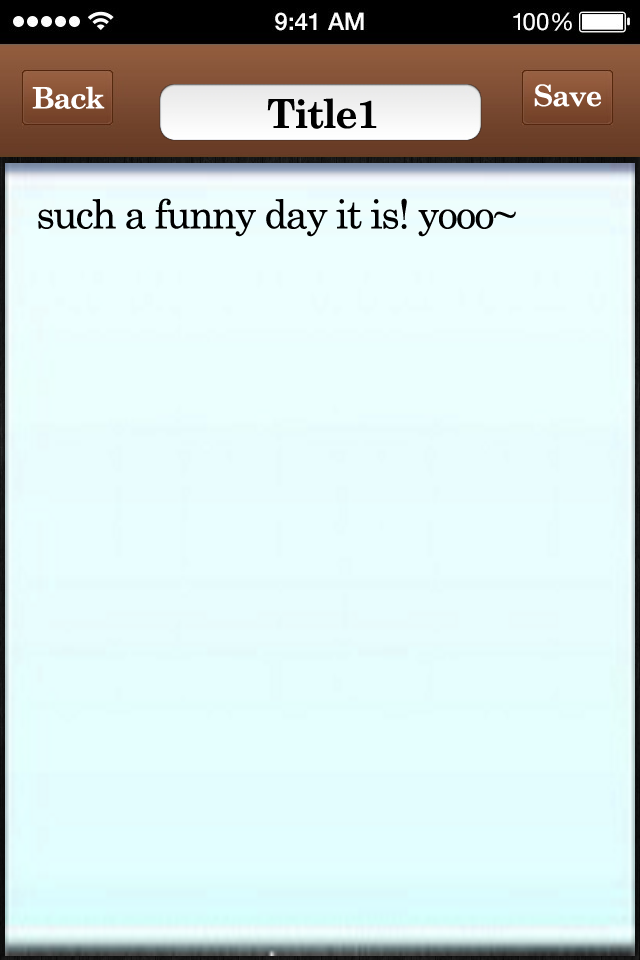
<style>
.page{position:relative;width:640px;height:960px}
.page>*{position:absolute;margin:0}
.t1{font:29.3px "CenturySchoolbook-Bold";letter-spacing:-0.04em;color:#ffffff}
.t2{font:40px "CenturySchoolbook-Bold";letter-spacing:-0.04em;color:#000000}
.t3{font:40px "CenturySchoolbook";letter-spacing:-0.04em;color:#000000}
</style>
<div class="page">
<p class="t1" style="left:32px;top:86px;width:73px;height:23px">Back</p>
<p class="t1" style="left:534px;top:84px;width:67px;height:23px">Save</p>
<p class="t2" style="left:267px;top:98px;width:110px;height:31px">Title1</p>
<p class="t3" style="left:38px;top:198px;width:478px;height:39px">such a funny day it is! yooo~</p>
</div>
